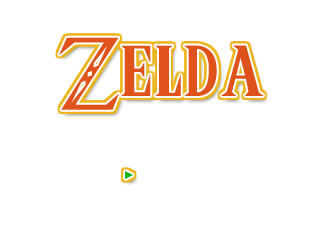
<style>
.page{position:relative;width:320px;height:240px;background:#ffffff}
.page>*{position:absolute;margin:0}
.t1{font:83.3px "Triforce";letter-spacing:0.03em;color:#df521b}
</style>
<div class="page">
<p class="t1" style="left:59px;top:37px;width:205px;height:73px">Zelda</p>
</div>
